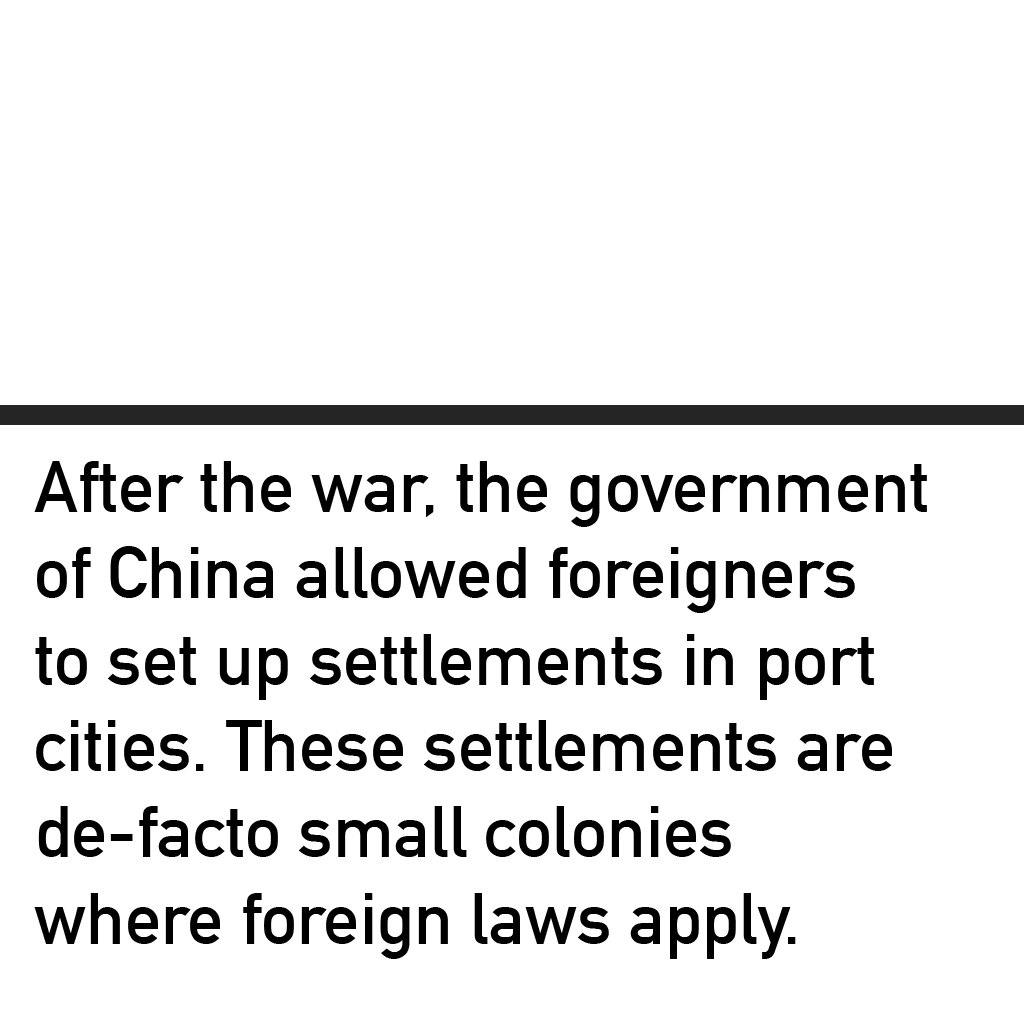
<style>
.page{position:relative;width:1024px;height:1024px;background:#ffffff}
.page>*{position:absolute;margin:0}
.t1{font:72px "DINAlternate-Bold";color:#000000}
</style>
<div class="page">
<p class="t1" style="left:34px;top:461px;width:893px;height:498px">After the war, the government<br>of China allowed foreigners<br>to set up settlements in port <br>cities. These settlements are <br>de-facto small colonies <br>where foreign laws apply.</p>
</div>
